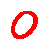
<style>
.page{position:relative;width:50px;height:50px;background:#ffffff}
.page>*{position:absolute;margin:0}
.t1{font:36px "SegoeScript";color:#ff0000;font-weight:bold}
</style>
<div class="page">
<p class="t1" style="left:11px;top:11px;width:27px;height:28px">O</p>
</div>
